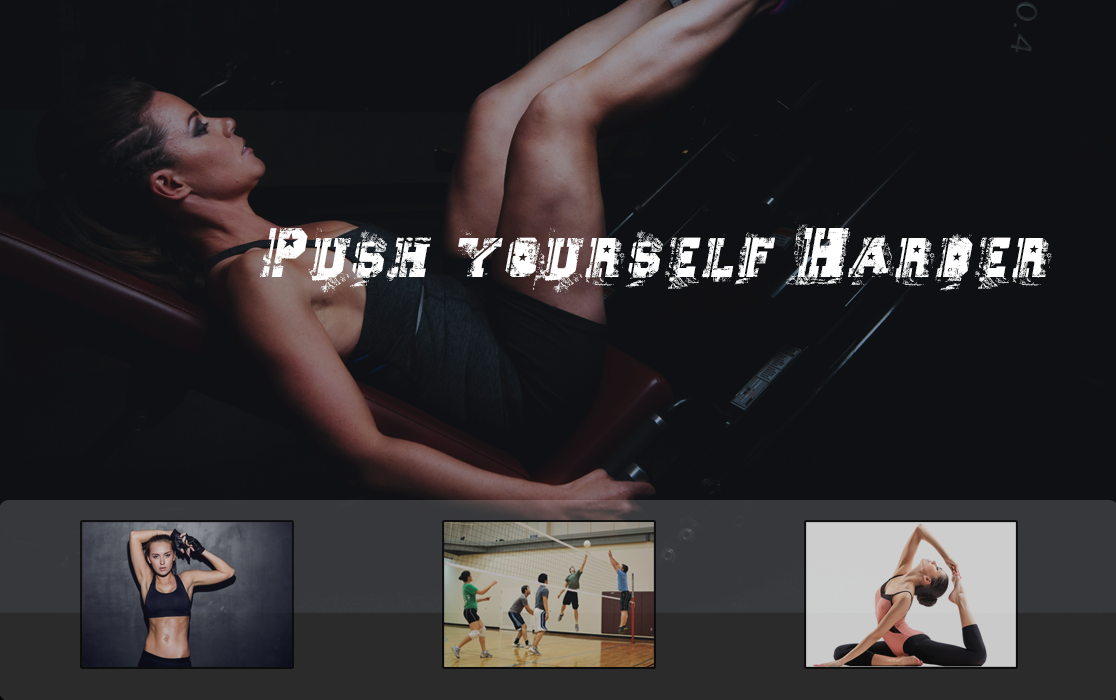
<style>
.page{position:relative;width:1116px;height:700px;background:#0e1014}
.page>*{position:absolute;margin:0}
.t1{font:60px "Ascent2Stardom";letter-spacing:0.1em;color:#ffffff;font-style:italic}
</style>
<div class="page">
<p class="t1" style="left:260px;top:222px;width:792px;height:71px">Push yourself Harder</p>
</div>
